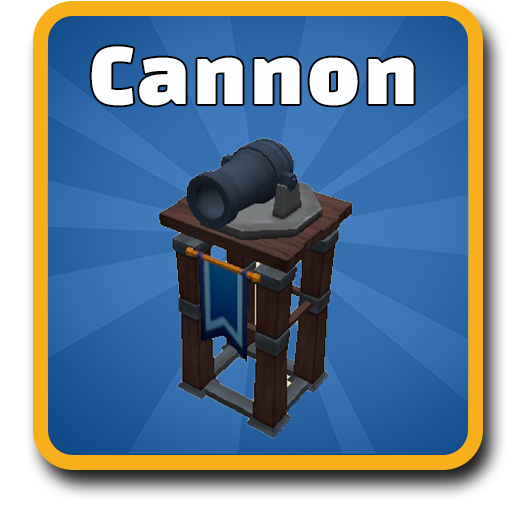
<style>
.page{position:relative;width:512px;height:512px}
.page>*{position:absolute;margin:0}
.t1{font:90px "ChangaOne";letter-spacing:0.04em;color:#fdfeff}
</style>
<div class="page">
<p class="t1" style="left:91px;top:46px;width:323px;height:60px">Cannon</p>
</div>
